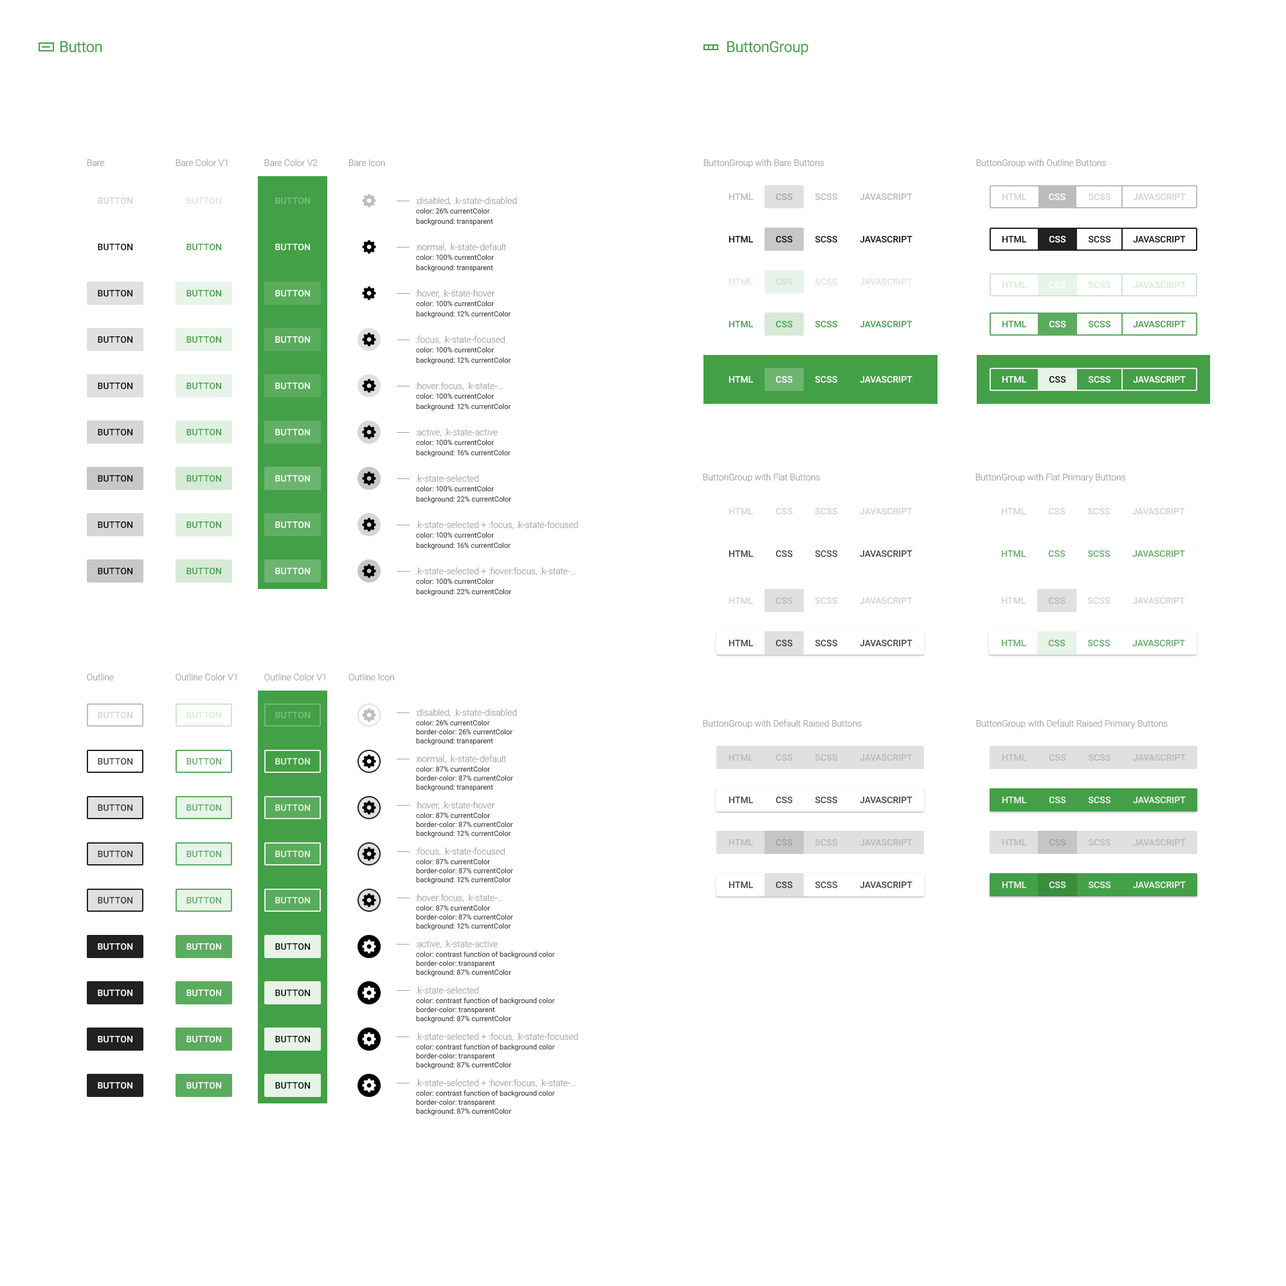
<style>
.page{position:relative;width:1286px;height:1286px;background:#ffffff}
.page>*{position:absolute;margin:0}
.t1{font:15.4px "Roboto-Regular";letter-spacing:-0.025em;color:#43a047}
.t2{font:9px "Roboto-Light";color:#a1a1a1}
.t3{font:9px "Roboto-Medium";letter-spacing:0.01em;color:#d2d2d2;text-transform:uppercase}
.t4{font:9px "Roboto-Medium";letter-spacing:0.01em;color:#d9e9d9;text-transform:uppercase}
.t5{font:9px "Roboto-Medium";letter-spacing:0.01em;color:#83bb85;text-transform:uppercase}
.t6{font:9px "Roboto-Medium";color:#bbbbbb;text-transform:uppercase}
.t7{font:9px "Roboto-Medium";color:#ffffff;text-transform:uppercase}
.t8{font:7.1px/10.3px "Roboto-Regular";color:#383838}
.t9{font:7.1px/46.3px "Roboto-Regular";color:#383838}
.t10{font:7.1px/36px "Roboto-Regular";color:#383838}
.t11{font:9px "Roboto-Medium";letter-spacing:0.01em;color:#000000;text-transform:uppercase}
.t12{font:9px "Roboto-Medium";letter-spacing:0.01em;color:#43a047;text-transform:uppercase}
.t13{font:9px "Roboto-Medium";letter-spacing:0.01em;color:#ffffff;text-transform:uppercase}
.t14{font:9px "Roboto-Medium";color:#000000;text-transform:uppercase}
.t15{font:9px "Roboto-Medium";color:#d9e9d9;text-transform:uppercase}
.t16{font:9px "Roboto-Medium";color:#43a047;text-transform:uppercase}
.t17{font:9px "Roboto-Medium";color:#d2d2d2;text-transform:uppercase}
.t18{font:9px "Roboto-Medium";color:#404040;text-transform:uppercase}
.t19{font:9px "Roboto-Medium";color:#66ae69;text-transform:uppercase}
.t20{font:7.1px/9px "Roboto-Regular";color:#383838}
.t21{font:9px "Roboto-Medium";letter-spacing:0.01em;color:#404040;text-transform:uppercase}
.t22{font:9px "Roboto-Medium";letter-spacing:0.01em;color:#66ae69;text-transform:uppercase}
.t23{font:9px "Roboto-Medium";color:#b9b9b9;text-transform:uppercase}
.t24{font:9px "Roboto-Medium";letter-spacing:0.01em;color:#373737;text-transform:uppercase}
.t25{font:9px "Roboto-Medium";letter-spacing:0.01em;color:#61ac64;text-transform:uppercase}
</style>
<div class="page">
<p class="t1" style="left:60px;top:41px;width:42px;height:12px">Button</p>
<p class="t1" style="left:727px;top:40px;width:81px;height:15px">ButtonGroup</p>
<p class="t2" style="left:87px;top:159px;width:18px;height:7px">Bare</p>
<p class="t2" style="left:176px;top:159px;width:52px;height:7px">Bare Color V1</p>
<p class="t2" style="left:264px;top:159px;width:54px;height:7px">Bare Color V2</p>
<p class="t2" style="left:348px;top:159px;width:37px;height:7px">Bare Icon</p>
<p class="t2" style="left:703px;top:159px;width:121px;height:9px">ButtonGroup with Bare Buttons</p>
<p class="t2" style="left:976px;top:159px;width:130px;height:9px">ButtonGroup with Outline Buttons</p>
<p class="t3" style="left:98px;top:197px;width:34px;height:7px">Button</p>
<p class="t4" style="left:186px;top:197px;width:35px;height:7px">Button</p>
<p class="t5" style="left:275px;top:197px;width:35px;height:7px">Button</p>
<p class="t6" style="left:728px;top:193px;width:184px;height:8px">HTML          CSS          SCSS          JavaScript</p>
<p class="t7" style="left:1048px;top:193px;width:17px;height:8px">CSS</p>
<p class="t8" style="left:416px;top:208px;width:95px;height:388px"><span class="t9">color: 26% currentColor<br></span>background: transparent<br><span class="t10">color: 100% currentColor<br></span>background: transparent<br><span class="t10">color: 100% currentColor<br></span>background: 12% currentColor<br><span class="t10">color: 100% currentColor<br></span>background: 12% currentColor<br><span class="t10">color: 100% currentColor<br></span>background: 12% currentColor<br><span class="t10">color: 100% currentColor<br></span>background: 16% currentColor<br><span class="t10">color: 100% currentColor<br></span>background: 22% currentColor<br><span class="t10">color: 100% currentColor<br></span>background: 16% currentColor<br><span class="t10">color: 100% currentColor<br></span>background: 22% currentColor</p>
<p class="t11" style="left:98px;top:244px;width:34px;height:7px">Button</p>
<p class="t12" style="left:186px;top:244px;width:35px;height:7px">Button</p>
<p class="t13" style="left:275px;top:244px;width:35px;height:7px">Button</p>
<p class="t14" style="left:728px;top:235px;width:184px;height:8px">HTML          CSS          SCSS          JavaScript</p>
<p class="t14" style="left:1002px;top:235px;width:183px;height:8px">HTML        <span class="t7">  CSS  </span>        SCSS          JavaScript</p>
<p class="t15" style="left:728px;top:278px;width:184px;height:7px">HTML          CSS          SCSS          JavaScript</p>
<p class="t15" style="left:1002px;top:281px;width:183px;height:8px">HTML                            SCSS          JavaScript</p>
<p class="t7" style="left:1048px;top:281px;width:17px;height:8px">CSS</p>
<p class="t11" style="left:98px;top:290px;width:34px;height:7px">Button</p>
<p class="t12" style="left:186px;top:290px;width:35px;height:7px">Button</p>
<p class="t13" style="left:275px;top:290px;width:35px;height:7px">Button</p>
<p class="t16" style="left:728px;top:320px;width:184px;height:8px">HTML          CSS          SCSS          JavaScript</p>
<p class="t16" style="left:1002px;top:320px;width:183px;height:8px">HTML         <span class="t7"> CSS</span>          SCSS          JavaScript</p>
<p class="t11" style="left:98px;top:336px;width:34px;height:7px">Button</p>
<p class="t12" style="left:186px;top:336px;width:35px;height:7px">Button</p>
<p class="t13" style="left:275px;top:336px;width:35px;height:7px">Button</p>
<p class="t7" style="left:728px;top:375px;width:184px;height:8px">HTML          CSS          SCSS          JavaScript</p>
<p class="t7" style="left:1002px;top:375px;width:183px;height:8px">HTML          <span class="t14">CSS</span>          SCSS          JavaScript</p>
<p class="t11" style="left:98px;top:382px;width:34px;height:8px">Button</p>
<p class="t12" style="left:186px;top:382px;width:35px;height:8px">Button</p>
<p class="t13" style="left:275px;top:382px;width:35px;height:8px">Button</p>
<p class="t11" style="left:98px;top:429px;width:34px;height:7px">Button</p>
<p class="t12" style="left:186px;top:429px;width:35px;height:7px">Button</p>
<p class="t13" style="left:275px;top:429px;width:35px;height:7px">Button</p>
<p class="t2" style="left:703px;top:473px;width:117px;height:9px">ButtonGroup with Flat Buttons</p>
<p class="t2" style="left:975px;top:473px;width:150px;height:10px">ButtonGroup with Flat Primary Buttons</p>
<p class="t11" style="left:98px;top:475px;width:34px;height:7px">Button</p>
<p class="t12" style="left:186px;top:475px;width:35px;height:7px">Button</p>
<p class="t13" style="left:275px;top:475px;width:35px;height:7px">Button</p>
<p class="t17" style="left:728px;top:507px;width:184px;height:8px">HTML          CSS          SCSS          JavaScript</p>
<p class="t17" style="left:1001px;top:507px;width:184px;height:8px">HTML          CSS          SCSS          JavaScript</p>
<p class="t11" style="left:98px;top:521px;width:34px;height:7px">Button</p>
<p class="t12" style="left:186px;top:521px;width:35px;height:7px">Button</p>
<p class="t13" style="left:275px;top:521px;width:35px;height:7px">Button</p>
<p class="t18" style="left:728px;top:550px;width:184px;height:7px">HTML          CSS          SCSS          JavaScript</p>
<p class="t19" style="left:1001px;top:550px;width:184px;height:7px">HTML          CSS          SCSS          JavaScript</p>
<p class="t11" style="left:98px;top:568px;width:34px;height:7px">Button</p>
<p class="t12" style="left:186px;top:568px;width:35px;height:7px">Button</p>
<p class="t13" style="left:275px;top:568px;width:35px;height:7px">Button</p>
<p class="t17" style="left:728px;top:597px;width:184px;height:7px">HTML          CSS          SCSS          JavaScript</p>
<p class="t17" style="left:1001px;top:597px;width:184px;height:7px">HTML          CSS          SCSS          JavaScript</p>
<p class="t18" style="left:728px;top:639px;width:184px;height:8px">HTML          CSS          SCSS          JavaScript</p>
<p class="t19" style="left:1001px;top:639px;width:184px;height:8px">HTML          CSS          SCSS          JavaScript</p>
<p class="t2" style="left:87px;top:673px;width:27px;height:8px">Outline</p>
<p class="t2" style="left:176px;top:673px;width:61px;height:8px">Outline Color V1</p>
<p class="t2" style="left:264px;top:673px;width:61px;height:8px">Outline Color V1</p>
<p class="t2" style="left:348px;top:673px;width:46px;height:8px">Outline Icon</p>
<p class="t3" style="left:98px;top:712px;width:34px;height:7px">Button</p>
<p class="t4" style="left:186px;top:712px;width:35px;height:7px">Button</p>
<p class="t5" style="left:275px;top:712px;width:35px;height:7px">Button</p>
<p class="t20" style="left:416px;top:719px;width:96px;height:26px">color: 26% currentColor<br>border-color: 26% currentColor<br>background: transparent</p>
<p class="t2" style="left:703px;top:719px;width:158px;height:9px">ButtonGroup with Default Raised Buttons</p>
<p class="t2" style="left:976px;top:719px;width:191px;height:10px">ButtonGroup with Default Raised Primary Buttons</p>
<p class="t21" style="left:98px;top:758px;width:34px;height:7px">Button</p>
<p class="t22" style="left:186px;top:758px;width:35px;height:7px">Button</p>
<p class="t13" style="left:275px;top:758px;width:35px;height:7px;opacity:0.87">Button</p>
<p class="t23" style="left:728px;top:753px;width:184px;height:8px">HTML          CSS          SCSS          JavaScript</p>
<p class="t23" style="left:1002px;top:753px;width:183px;height:8px">HTML          CSS          SCSS          JavaScript</p>
<p class="t20" style="left:416px;top:766px;width:97px;height:25px">color: 87% currentColor<br>border-color: 87% currentColor<br>background: transparent</p>
<p class="t18" style="left:728px;top:796px;width:184px;height:8px">HTML          CSS          SCSS          JavaScript</p>
<p class="t7" style="left:1002px;top:796px;width:183px;height:8px;opacity:0.87">HTML          CSS          SCSS          JavaScript</p>
<p class="t24" style="left:98px;top:804px;width:34px;height:7px">Button</p>
<p class="t25" style="left:186px;top:804px;width:35px;height:7px">Button</p>
<p class="t13" style="left:275px;top:804px;width:35px;height:7px;opacity:0.87">Button</p>
<p class="t20" style="left:416px;top:812px;width:97px;height:26px">color: 87% currentColor<br>border-color: 87% currentColor<br>background: 12% currentColor</p>
<p class="t23" style="left:728px;top:838px;width:184px;height:8px">HTML          CSS          SCSS          JavaScript</p>
<p class="t23" style="left:1002px;top:838px;width:183px;height:8px">HTML          CSS          SCSS          JavaScript</p>
<p class="t24" style="left:98px;top:851px;width:34px;height:7px">Button</p>
<p class="t25" style="left:186px;top:851px;width:35px;height:7px">Button</p>
<p class="t13" style="left:275px;top:851px;width:35px;height:7px;opacity:0.87">Button</p>
<p class="t20" style="left:416px;top:858px;width:97px;height:26px">color: 87% currentColor<br>border-color: 87% currentColor<br>background: 12% currentColor</p>
<p class="t18" style="left:728px;top:881px;width:184px;height:7px">HTML          CSS          SCSS          JavaScript</p>
<p class="t7" style="left:1002px;top:881px;width:183px;height:7px;opacity:0.87">HTML          CSS          SCSS          JavaScript</p>
<p class="t24" style="left:98px;top:897px;width:34px;height:7px">Button</p>
<p class="t25" style="left:186px;top:897px;width:35px;height:7px">Button</p>
<p class="t13" style="left:275px;top:897px;width:35px;height:7px;opacity:0.87">Button</p>
<p class="t20" style="left:416px;top:905px;width:97px;height:25px">color: 87% currentColor<br>border-color: 87% currentColor<br>background: 12% currentColor</p>
<p class="t13" style="left:98px;top:943px;width:34px;height:7px">Button</p>
<p class="t13" style="left:186px;top:943px;width:35px;height:7px">Button</p>
<p class="t11" style="left:275px;top:943px;width:35px;height:7px">Button</p>
<p class="t20" style="left:416px;top:951px;width:139px;height:26px">color: contrast function of background color<br>border-color: transparent<br>background: 87% currentColor</p>
<p class="t13" style="left:98px;top:989px;width:34px;height:7px">Button</p>
<p class="t13" style="left:186px;top:989px;width:35px;height:7px">Button</p>
<p class="t11" style="left:275px;top:989px;width:35px;height:7px">Button</p>
<p class="t20" style="left:416px;top:997px;width:139px;height:26px">color: contrast function of background color<br>border-color: transparent<br>background: 87% currentColor</p>
<p class="t13" style="left:98px;top:1036px;width:34px;height:7px">Button</p>
<p class="t13" style="left:186px;top:1036px;width:35px;height:7px">Button</p>
<p class="t11" style="left:275px;top:1036px;width:35px;height:7px">Button</p>
<p class="t20" style="left:416px;top:1043px;width:139px;height:26px">color: contrast function of background color<br>border-color: transparent<br>background: 87% currentColor</p>
<p class="t13" style="left:98px;top:1082px;width:34px;height:7px">Button</p>
<p class="t13" style="left:186px;top:1082px;width:35px;height:7px">Button</p>
<p class="t11" style="left:275px;top:1082px;width:35px;height:7px">Button</p>
<p class="t20" style="left:416px;top:1090px;width:139px;height:25px">color: contrast function of background color<br>border-color: transparent<br>background: 87% currentColor</p>
</div>
